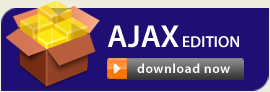
<style>
.page{position:relative;width:270px;height:92px;background:#1f0f74}
.page>*{position:absolute;margin:0}
.t1{font:32px "MyriadPro-Semibold";color:#ffffff}
.t2{font:16px "MyriadPro-Semibold";color:#ffffff}
.t3{font:13.3px "MyriadPro-Semibold";letter-spacing:0.05em;color:#ffffff}
</style>
<div class="page">
<p class="t1" style="left:107px;top:25px;width:72px;height:23px">AJAX</p>
<p class="t2" style="left:183px;top:36px;width:56px;height:12px">EDITION</p>
<p class="t3" style="left:137px;top:63px;width:93px;height:10px">download now</p>
</div>
